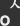
<style>
.page{position:relative;width:20px;height:26px;background:#333333}
.page>*{position:absolute;margin:0}
.t1{font:12px "DFKaiShu-SB-Estd-BF";color:#ececec;font-weight:bold}
.t2{font:18px "ArialMT";color:#ececec;font-weight:bold}
</style>
<div class="page">
<p class="t1" style="left:10px;top:0px;width:12px;height:9px">人</p>
<p class="t2" style="left:0px;top:15px;width:10px;height:11px">o</p>
</div>
